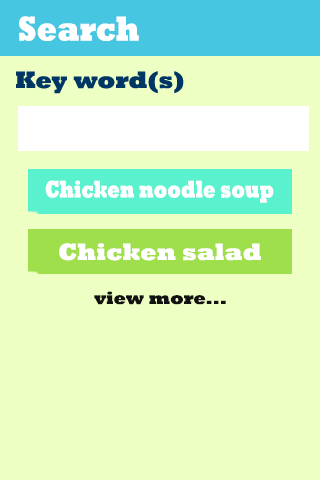
<style>
.page{position:relative;width:320px;height:480px;background:#edffc3}
.page>*{position:absolute;margin:0}
.t1{font:35.2px "Rockwell-ExtraBold";color:#ffffff;scale:0.84 1}
.t2{font:24.3px "Rockwell-ExtraBold";color:#ffffff;scale:0.75 1}
.t3{font:24px "Rockwell-ExtraBold";color:#ffffff}
.t4{font:18px "Rockwell-ExtraBold";color:#111111}
</style>
<div class="page">
<p class="t1" style="left:19px;top:16px;width:120px;height:25px">Search</p>
<p class="t2" style="left:45px;top:180px;width:229px;height:23px">Chicken noodle soup</p>
<p class="t3" style="left:59px;top:243px;width:202px;height:18px">Chicken salad</p>
<p class="t4" style="left:94px;top:291px;width:132px;height:14px">view more...</p>
</div>
